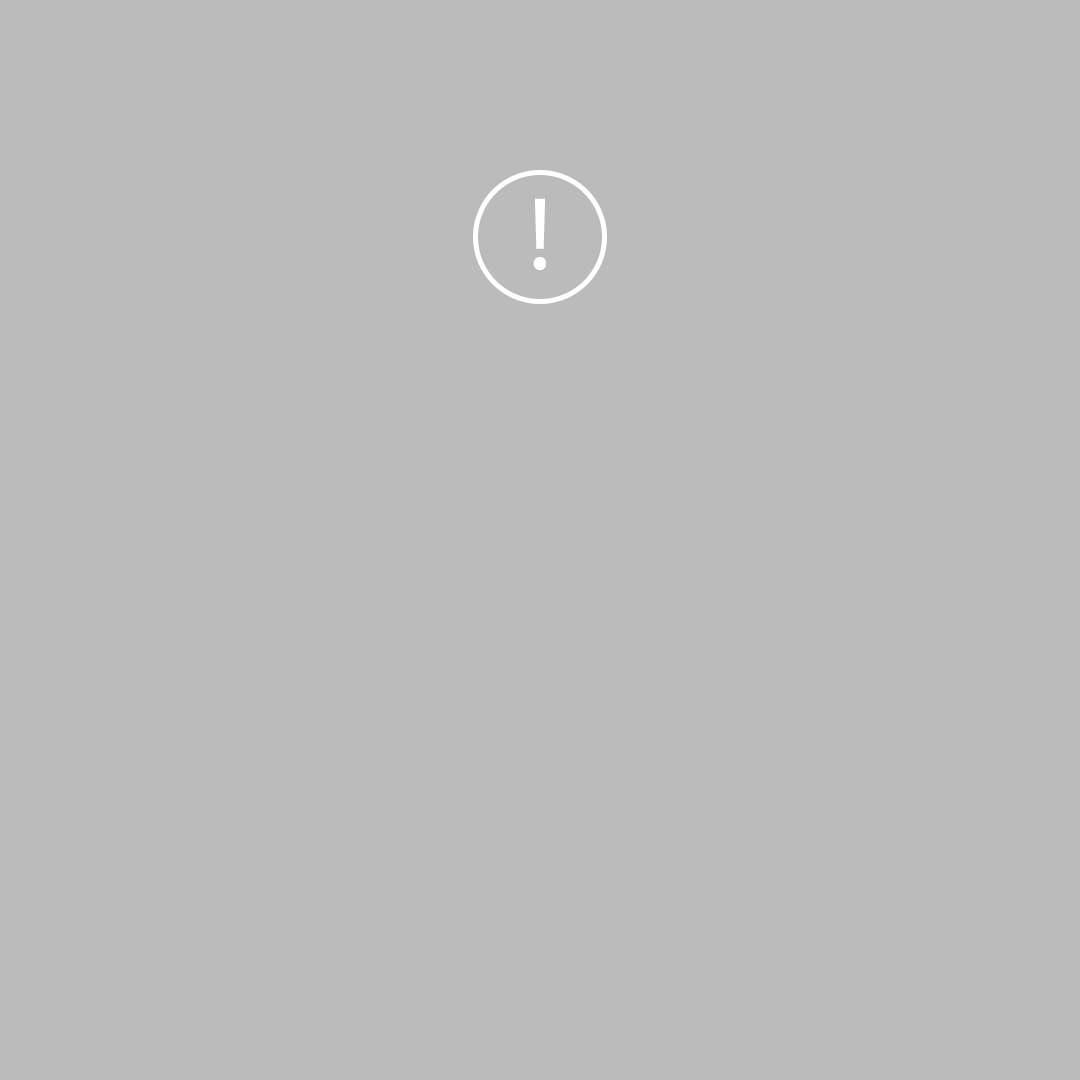
<style>
.page{position:relative;width:1080px;height:1080px;background:#bbbbbb}
.page>*{position:absolute;margin:0}
.t1{font:104.2px "MyriadPro-Regular";letter-spacing:0.05em;color:#ffffff;text-transform:uppercase}
</style>
<div class="page">
<p class="t1" style="left:533px;top:198px;width:13px;height:73px">!</p>
</div>
